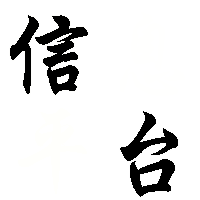
<style>
.page{position:relative;width:200px;height:200px;background:#ffffff}
.page>*{position:absolute;margin:0}
.t1{font:100px "STXingkai";color:#000000}
</style>
<div class="page">
<p class="t1" style="left:10px;top:15px;width:78px;height:80px">信</p>
<p class="t1" style="left:120px;top:111px;width:58px;height:86px">台</p>
</div>
